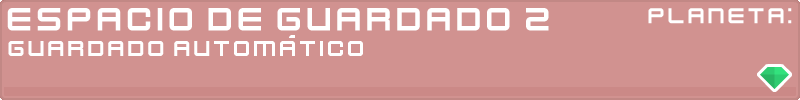
<style>
.page{position:relative;width:800px;height:100px;background:#d19290}
.page>*{position:absolute;margin:0}
.t1{font:36px "KenVector-Future";color:#ffffff}
.t2{font:24px "KenVector-Future";color:#ffffff}
</style>
<div class="page">
<p class="t1" style="left:7px;top:8px;width:542px;height:23px">espacio de guardado 2</p>
<p class="t2" style="left:648px;top:8px;width:144px;height:16px">planeta:</p>
<p class="t2" style="left:8px;top:35px;width:355px;height:21px">guardado automático</p>
</div>
